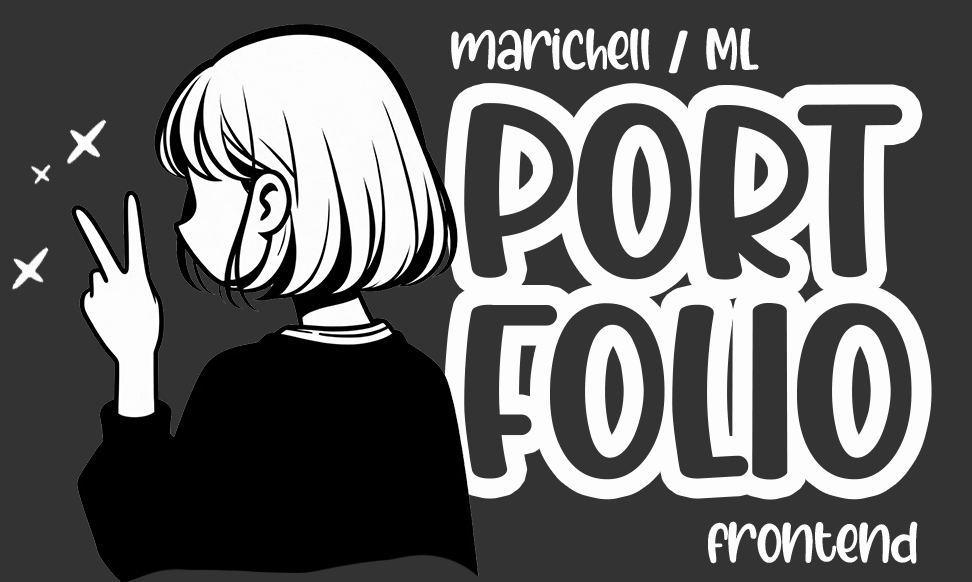
<style>
.page{position:relative;width:972px;height:582px;background:#333333}
.page>*{position:absolute;margin:0}
.t1{font:60px "HappykinRegular";color:#fdfdfd}
.t2{font:250px/200px "HappykinRegular";color:#333333}
</style>
<div class="page">
<p class="t1" style="left:451px;top:27px;width:308px;height:47px">marichell / ML</p>
<p class="t2" style="left:464px;top:103px;width:448px;height:377px">PORT<br>FOLIO</p>
<p class="t1" style="left:708px;top:521px;width:210px;height:43px">frontend</p>
</div>
